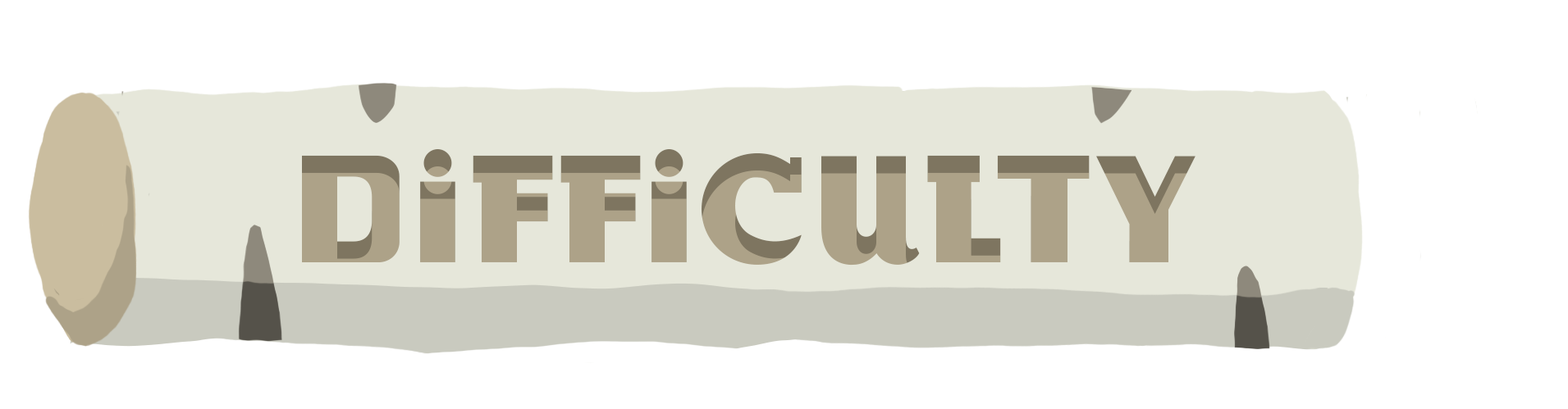
<style>
.page{position:relative;width:1568px;height:409px;background:#ffffff}
.page>*{position:absolute;margin:0}
.t1{font:148px "BadTyp-Regular";color:#ada288}
</style>
<div class="page">
<p class="t1" style="left:302px;top:149px;width:893px;height:117px">Difficulty</p>
</div>
